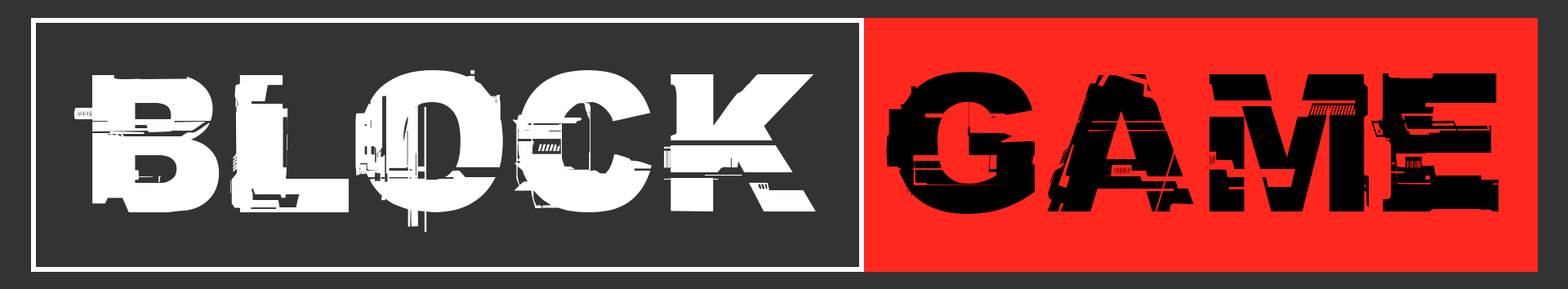
<style>
.page{position:relative;width:1568px;height:289px;background:#333333}
.page>*{position:absolute;margin:0}
.t1{font:174.5px "CFGlitchCity-Regular";color:#ffffff}
.t2{font:174.5px "CFGlitchCity-Regular";color:#000000}
</style>
<div class="page">
<p class="t1" style="left:74px;top:70px;width:1425px;height:162px">BLOCK<span class="t2"> GAME</span></p>
</div>
